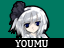
<style>
.page{position:relative;width:64px;height:48px;background:#007961}
.page>*{position:absolute;margin:0}
.t1{font:10px "Cambria";color:#ffffff}
</style>
<div class="page">
<p class="t1" style="left:15px;top:40px;width:33px;height:7px">YOUMU</p>
</div>
